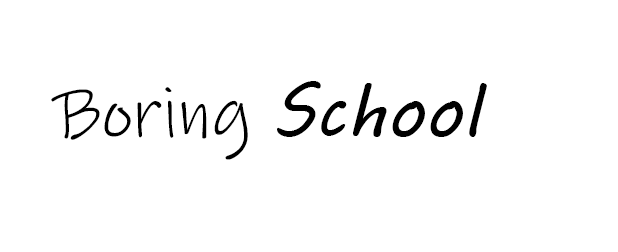
<style>
.page{position:relative;width:618px;height:252px;background:#ffffff}
.page>*{position:absolute;margin:0}
.t1{font:72px "InkFree";color:#000000}
.t2{font:72px "MVBoli";color:#000000}
</style>
<div class="page">
<p class="t1" style="left:51px;top:81px;width:436px;height:79px">Boring <span class="t2">School</span></p>
</div>
